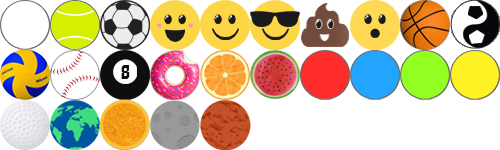
<style>
.page{position:relative;width:500px;height:150px;background:#ffffff}
.page>*{position:absolute;margin:0}
.t1{font:19.5px "AldotheApache";letter-spacing:0.17em;color:#231f20}
</style>
<div class="page">
<p class="t1" style="left:121px;top:65px;width:9px;height:14px">8</p>
</div>
